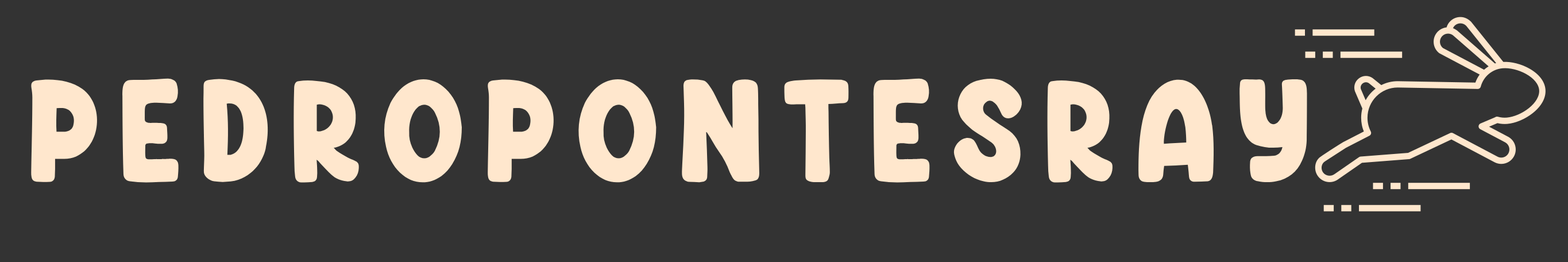
<style>
.page{position:relative;width:1568px;height:262px;background:#333333}
.page>*{position:absolute;margin:0}
.t1{font:129.2px "Lemon-Days";letter-spacing:0.146em;color:#ffe7cd}
</style>
<div class="page">
<p class="t1" style="left:30px;top:76px;width:1277px;height:110px">PedroPontesRay</p>
</div>
